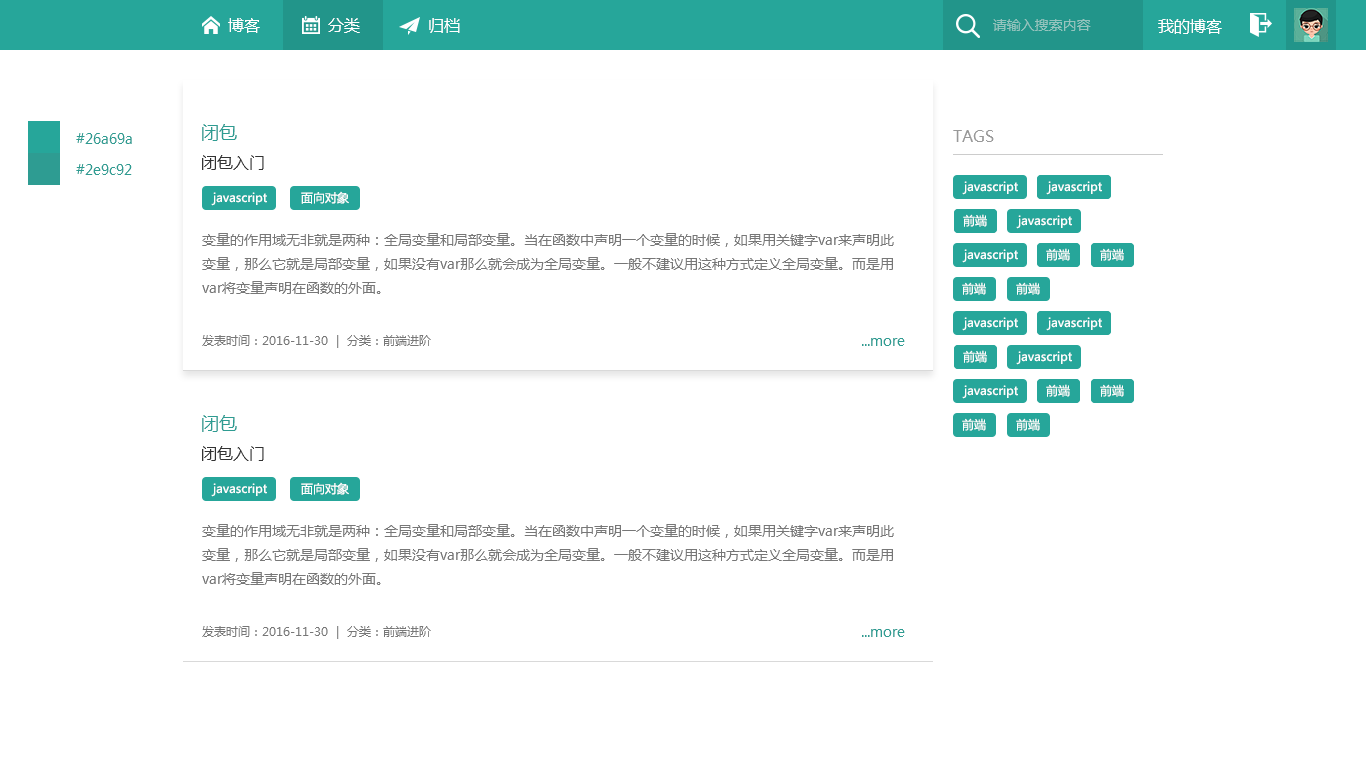
<style>
.page{position:relative;width:1366px;height:768px;background:#ffffff}
.page>*{position:absolute;margin:0}
.t1{font:16px "MicrosoftYaHei";color:#ffffff}
.t2{font:14px "MicrosoftYaHei";color:#95c4be}
.t3{font:18px "MicrosoftYaHei";color:#2e9c92}
.t4{font:14px "MicrosoftYaHei";color:#2e9c92}
.t5{font:16px "MicrosoftYaHei";color:#999999}
.t6{font:16px "MicrosoftYaHei";color:#333333}
.t7{font:12px "MicrosoftYaHei";color:#fefefe}
.t8{font:14px/24px "MicrosoftYaHei";color:#777777}
.t9{font:12px "MicrosoftYaHei";color:#777777}
</style>
<div class="page">
<p class="t1" style="left:228px;top:18px;width:32px;height:15px">博客</p>
<p class="t1" style="left:328px;top:18px;width:32px;height:15px">分类</p>
<p class="t1" style="left:429px;top:18px;width:31px;height:15px">归档</p>
<p class="t2" style="left:993px;top:19px;width:98px;height:12px">请输入搜索内容</p>
<p class="t1" style="left:1158px;top:19px;width:64px;height:15px">我的博客</p>
<p class="t3" style="left:202px;top:124px;width:35px;height:17px">闭包</p>
<p class="t4" style="left:76px;top:133px;width:56px;height:11px">#26a69a</p>
<p class="t5" style="left:953px;top:130px;width:41px;height:12px">TAGS</p>
<p class="t6" style="left:202px;top:155px;width:62px;height:15px">闭包入门</p>
<p class="t4" style="left:76px;top:164px;width:56px;height:11px">#2e9c92</p>
<p class="t7" style="left:962px;top:181px;width:56px;height:14px">javascript</p>
<p class="t7" style="left:1046px;top:181px;width:56px;height:14px">javascript</p>
<p class="t7" style="left:1046px;top:181px;width:56px;height:14px">javascript</p>
<p class="t7" style="left:211px;top:192px;width:56px;height:14px">javascript</p>
<p class="t7" style="left:301px;top:191px;width:48px;height:13px">面向对象</p>
<p class="t7" style="left:963px;top:214px;width:24px;height:13px">前端</p>
<p class="t7" style="left:963px;top:214px;width:24px;height:13px">前端</p>
<p class="t7" style="left:1016px;top:215px;width:56px;height:14px">javascript</p>
<p class="t8" style="left:202px;top:233px;width:692px;height:61px">变量的作用域无非就是两种：全局变量和局部变量。当在函数中声明一个变量的时候，如果用关键字var来声明此变量，那么它就是局部变量，如果没有var那么就会成为全局变量。一般不建议用这种方式定义全局变量。而是用var将变量声明在函数的外面。</p>
<p class="t7" style="left:962px;top:249px;width:56px;height:14px">javascript</p>
<p class="t7" style="left:1046px;top:248px;width:24px;height:13px">前端</p>
<p class="t7" style="left:1046px;top:248px;width:24px;height:13px">前端</p>
<p class="t7" style="left:1100px;top:248px;width:24px;height:13px">前端</p>
<p class="t7" style="left:1100px;top:248px;width:24px;height:13px">前端</p>
<p class="t7" style="left:962px;top:282px;width:24px;height:13px">前端</p>
<p class="t7" style="left:1016px;top:282px;width:24px;height:13px">前端</p>
<p class="t7" style="left:962px;top:317px;width:56px;height:14px">javascript</p>
<p class="t7" style="left:1046px;top:317px;width:56px;height:14px">javascript</p>
<p class="t7" style="left:1046px;top:317px;width:56px;height:14px">javascript</p>
<p class="t9" style="left:202px;top:335px;width:229px;height:13px">发表时间：2016-11-30  |  分类：前端进阶</p>
<p class="t4" style="left:862px;top:338px;width:43px;height:8px">...more</p>
<p class="t7" style="left:963px;top:350px;width:24px;height:13px">前端</p>
<p class="t7" style="left:963px;top:350px;width:24px;height:13px">前端</p>
<p class="t7" style="left:1016px;top:351px;width:56px;height:14px">javascript</p>
<p class="t7" style="left:962px;top:385px;width:56px;height:14px">javascript</p>
<p class="t7" style="left:1046px;top:384px;width:24px;height:13px">前端</p>
<p class="t7" style="left:1046px;top:384px;width:24px;height:13px">前端</p>
<p class="t7" style="left:1100px;top:384px;width:24px;height:13px">前端</p>
<p class="t7" style="left:1100px;top:384px;width:24px;height:13px">前端</p>
<p class="t3" style="left:202px;top:415px;width:35px;height:17px">闭包</p>
<p class="t7" style="left:962px;top:418px;width:24px;height:13px">前端</p>
<p class="t7" style="left:1016px;top:418px;width:24px;height:13px">前端</p>
<p class="t6" style="left:202px;top:446px;width:62px;height:15px">闭包入门</p>
<p class="t7" style="left:211px;top:483px;width:56px;height:14px">javascript</p>
<p class="t7" style="left:301px;top:482px;width:48px;height:13px">面向对象</p>
<p class="t8" style="left:202px;top:524px;width:692px;height:61px">变量的作用域无非就是两种：全局变量和局部变量。当在函数中声明一个变量的时候，如果用关键字var来声明此变量，那么它就是局部变量，如果没有var那么就会成为全局变量。一般不建议用这种方式定义全局变量。而是用var将变量声明在函数的外面。</p>
<p class="t9" style="left:202px;top:626px;width:229px;height:13px">发表时间：2016-11-30  |  分类：前端进阶</p>
<p class="t4" style="left:862px;top:629px;width:43px;height:8px">...more</p>
</div>
